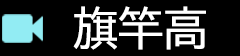
<style>
.page{position:relative;width:240px;height:56px;background:#000000}
.page>*{position:absolute;margin:0}
.t1{font:44.8px "BIZ-UDPGothic";color:#ffffff}
</style>
<div class="page">
<p class="t1" style="left:73px;top:6px;width:133px;height:44px">旗竿高</p>
</div>
